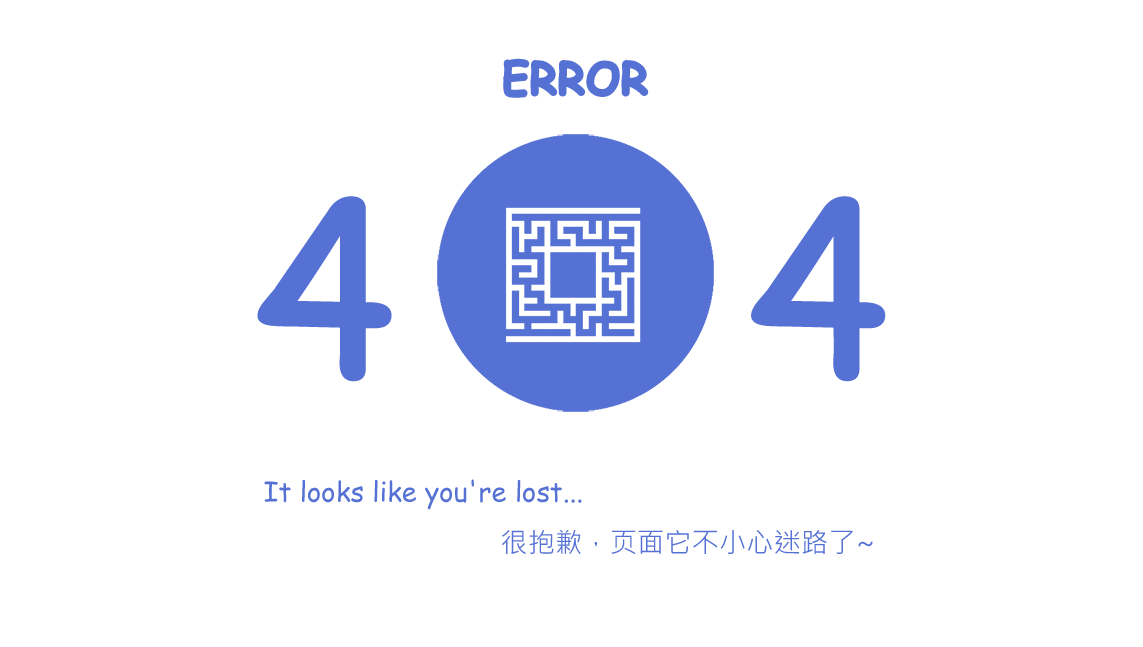
<style>
.page{position:relative;width:1143px;height:647px;background:#ffffff}
.page>*{position:absolute;margin:0}
.t1{font:42.6px "ComicSansMS";color:#5671d4;font-weight:bold}
.t2{font:233.9px "ComicSansMS";color:#5671d4;font-weight:bold}
.t3{font:27.3px "ComicSansMS";color:#5671d4}
.t4{font:27.3px "MicrosoftJhengHeiUIRegular";color:#5671d4}
</style>
<div class="page">
<p class="t1" style="left:503px;top:58px;width:146px;height:40px">ERROR</p>
<p class="t2" style="left:257px;top:196px;width:135px;height:186px">4</p>
<p class="t2" style="left:751px;top:196px;width:135px;height:186px">4</p>
<p class="t3" style="left:264px;top:479px;width:318px;height:31px">It looks like you're lost...</p>
<p class="t4" style="left:502px;top:529px;width:371px;height:25px">很抱歉，页面它不小心迷路了~</p>
</div>
